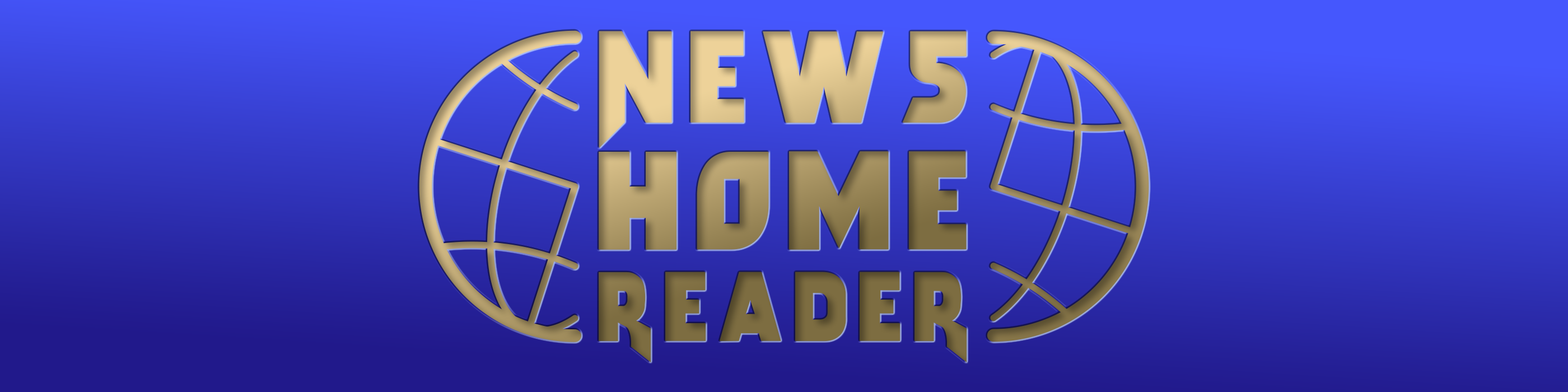
<style>
.page{position:relative;width:1568px;height:392px}
.page>*{position:absolute;margin:0}
.t1{font:91.4px "Arwing";letter-spacing:0.1em}
</style>
<div class="page">
<p class="t1" style="left:599px;top:31px;width:368px;height:332px;text-align:center">News<br>Home<br>Reader</p>
</div>
